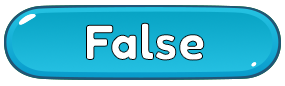
<style>
.page{position:relative;width:285px;height:86px;background:#ffffff}
.page>*{position:absolute;margin:0}
.t1{font:48px "FredokaOne-Regular";color:#ffffff}
</style>
<div class="page">
<p class="t1" style="left:86px;top:22px;width:119px;height:39px">False</p>
</div>
